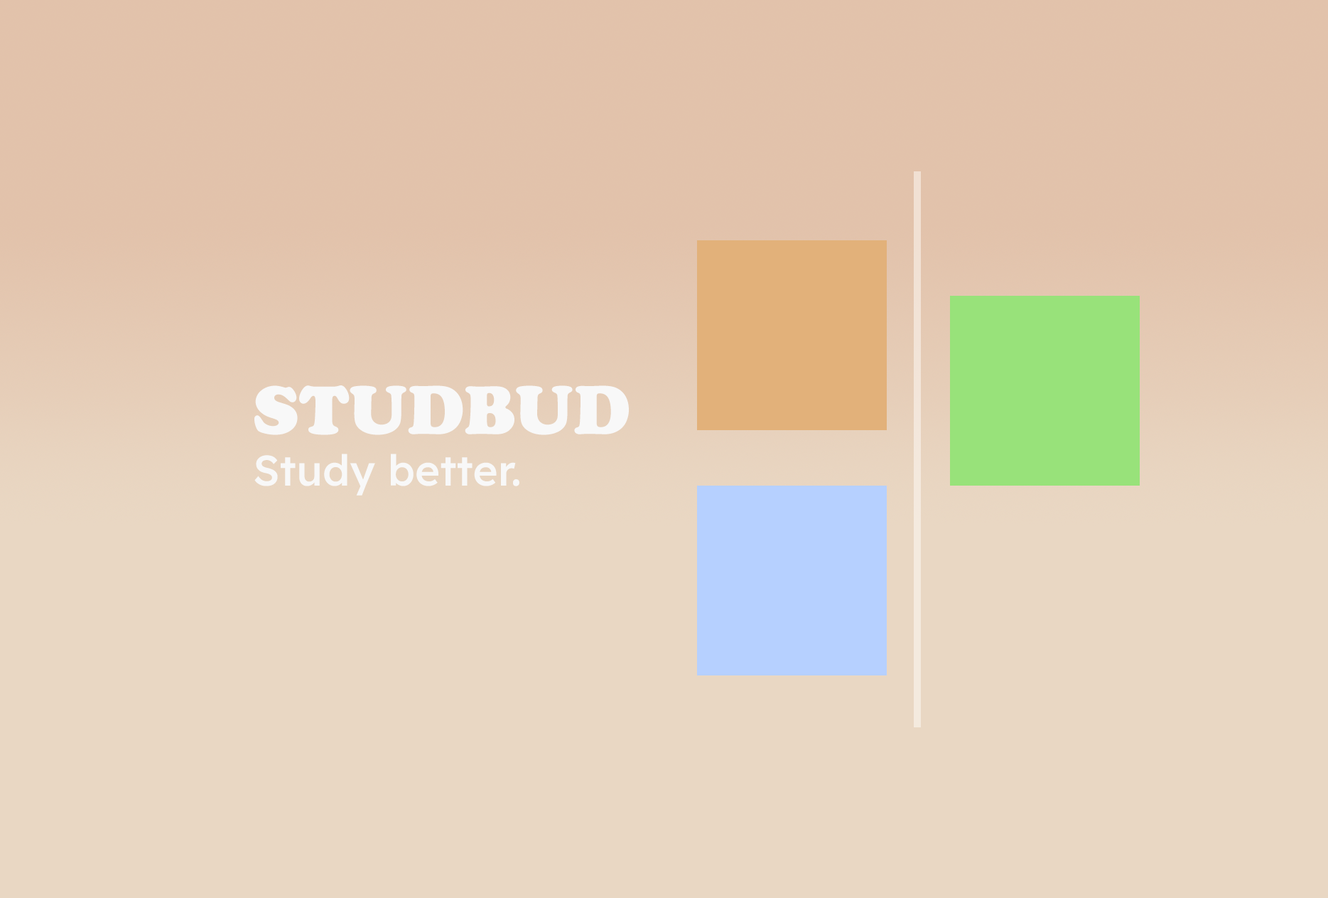
<style>
.page{position:relative;width:1328px;height:898px;background:#e9d7c3}
.page>*{position:absolute;margin:0}
.t1{font:71.1px "CooperBlack";color:#f8f8f8}
.t2{font:42.6px "ReadexPro-Medium";color:#f8f8f8}
</style>
<div class="page">
<p class="t1" style="left:254px;top:385px;width:375px;height:50px">STUDBUD</p>
<p class="t2" style="left:254px;top:453px;width:266px;height:42px">Study better.</p>
</div>
